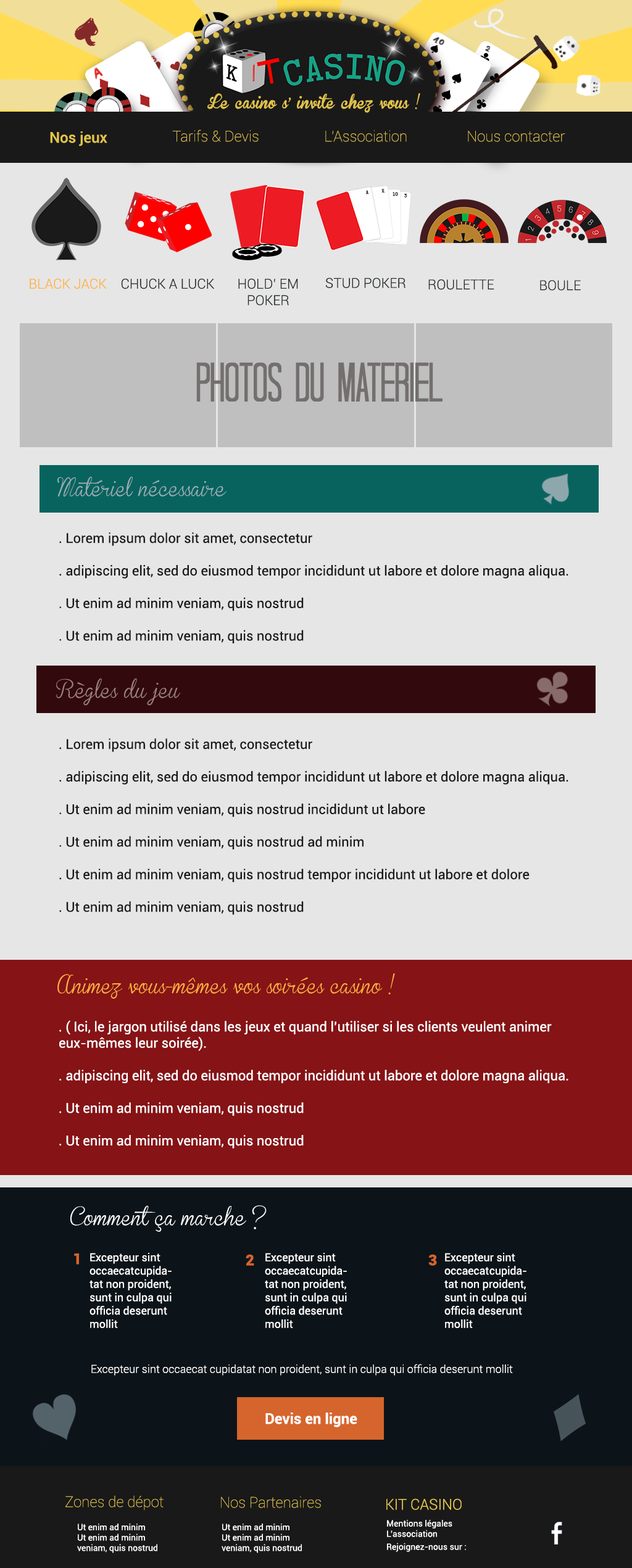
<style>
.page{position:relative;width:632px;height:1568px;background:#e6e6e6}
.page>*{position:absolute;margin:0}
.t1{font:13.6px "BrannbollFet";color:#e0c14b}
.t2{font:14.8px "Roboto-Medium";color:#e1c34c}
.t3{font:14.8px "Roboto-Thin";color:#e1c34c}
.t4{font:13.7px "Roboto-Light";color:#ffb142}
.t5{font:13.7px "Roboto-Light";color:#292d2f}
.t6{font:55.5px "TallDarkAndHandsome-Condensed";color:#746f6f}
.t7{font:18.5px "BrannbollSmal";color:#99afb6}
.t8{font:13.6px "Roboto-Regular";color:#191919}
.t9{font:18.5px "BrannbollSmal";color:#9e8181}
.t10{font:18.5px "BrannbollSmal";color:#ffb142}
.t11{font:13.6px "Roboto-Regular";color:#ffffff}
.t12{font:18.5px "BrannbollSmal";color:#ffffff}
.t13{font:14.8px "Roboto-Black";color:#d5652c}
.t14{font:11.1px "Roboto-Regular";color:#fffefe}
.t15{font:11.1px "Roboto-Light";color:#fffefe}
.t16{font:14.8px "Roboto-Bold";color:#ffffff}
.t17{font:14.8px "Roboto-Light";color:#e1c34c}
.t18{font:8.6px "Roboto-Regular";color:#ffffff}
.t19{font:8.6px/13px "Roboto-Regular";color:#ffffff}
</style>
<div class="page">
<p class="t1" style="left:207px;top:93px;width:213px;height:20px">Le casino s' invite chez vous !</p>
<p class="t2" style="left:50px;top:131px;width:57px;height:15px">Nos jeux</p>
<p class="t3" style="left:172px;top:130px;width:86px;height:12px">Tarifs &amp; Devis</p>
<p class="t3" style="left:325px;top:130px;width:81px;height:12px">L'Association</p>
<p class="t3" style="left:468px;top:131px;width:97px;height:11px">Nous contacter</p>
<p class="t4" style="left:30px;top:278px;width:77px;height:11px">BLACK JACK</p>
<p class="t5" style="left:121px;top:278px;width:93px;height:11px">CHUCK A LUCK</p>
<p class="t5" style="left:238px;top:278px;width:60px;height:27px;text-align:center">HOLD’ EM <br>POKER</p>
<p class="t5" style="left:326px;top:278px;width:79px;height:10px">STUD POKER</p>
<p class="t5" style="left:428px;top:279px;width:66px;height:11px">ROULETTE</p>
<p class="t5" style="left:540px;top:280px;width:40px;height:11px">BOULE</p>
<p class="t6" style="left:196px;top:362px;width:246px;height:40px">Photos du matEriel</p>
<p class="t7" style="left:57px;top:476px;width:169px;height:21px">Matériel nécessaire</p>
<p class="t8" style="left:59px;top:532px;width:509px;height:111px">. Lorem ipsum dolor sit amet, consectetur <br><br>. adipiscing elit, sed do eiusmod tempor incididunt ut labore et dolore magna aliqua. <br><br>. Ut enim ad minim veniam, quis nostrud <br><br>. Ut enim ad minim veniam, quis nostrud</p>
<p class="t9" style="left:56px;top:678px;width:124px;height:28px">Règles du jeu</p>
<p class="t8" style="left:59px;top:738px;width:509px;height:177px">. Lorem ipsum dolor sit amet, consectetur <br><br>. adipiscing elit, sed do eiusmod tempor incididunt ut labore et dolore magna aliqua. <br><br>. Ut enim ad minim veniam, quis nostrud incididunt ut labore<br><br>. Ut enim ad minim veniam, quis nostrud ad minim<br><br>. Ut enim ad minim veniam, quis nostrud tempor incididunt ut labore et dolore<br><br>. Ut enim ad minim veniam, quis nostrud</p>
<p class="t10" style="left:57px;top:973px;width:338px;height:26px">Animez vous-mêmes vos soirées casino !</p>
<p class="t11" style="left:59px;top:1020px;width:509px;height:129px">. ( Ici, le jargon utilisé dans les jeux et quand l’utiliser si les clients veulent animer eux-mêmes leur soirée).<br><br>. adipiscing elit, sed do eiusmod tempor incididunt ut labore et dolore magna aliqua. <br><br>. Ut enim ad minim veniam, quis nostrud <br><br>. Ut enim ad minim veniam, quis nostrud</p>
<p class="t12" style="left:70px;top:1205px;width:196px;height:27px">Comment ça marche ?</p>
<p class="t13" style="left:74px;top:1253px;width:5px;height:12px">1</p>
<p class="t14" style="left:89px;top:1253px;width:82px;height:75px">Excepteur sint occaecat cupidatat non proident, sunt in culpa qui officia deserunt mollit</p>
<p class="t14" style="left:265px;top:1253px;width:82px;height:75px">Excepteur sint occaecat cupidatat non proident, sunt in culpa qui officia deserunt mollit</p>
<p class="t14" style="left:444px;top:1253px;width:82px;height:75px">Excepteur sint occaecat cupidatat non proident, sunt in culpa qui officia deserunt mollit</p>
<p class="t13" style="left:246px;top:1254px;width:8px;height:12px">2</p>
<p class="t13" style="left:428px;top:1254px;width:9px;height:12px">3</p>
<p class="t15" style="left:91px;top:1364px;width:422px;height:12px">Excepteur sint occaecat cupidatat non proident, sunt in culpa qui officia deserunt mollit</p>
<p class="t16" style="left:265px;top:1413px;width:92px;height:14px">Devis en ligne</p>
<p class="t3" style="left:65px;top:1495px;width:98px;height:15px">Zones de dépot</p>
<p class="t3" style="left:221px;top:1496px;width:100px;height:12px">Nos Partenaires</p>
<p class="t17" style="left:386px;top:1498px;width:75px;height:12px">KIT CASINO</p>
<p class="t18" style="left:77px;top:1524px;width:80px;height:29px">Ut enim ad minim <br>Ut enim ad minim <br>veniam, quis nostrud</p>
<p class="t18" style="left:221px;top:1524px;width:81px;height:29px">Ut enim ad minim <br>Ut enim ad minim <br>veniam, quis nostrud</p>
<p class="t18" style="left:387px;top:1520px;width:79px;height:32px">Mentions légales<br>L’association<br><span class="t19">Rejoignez-nous sur :</span></p>
</div>
